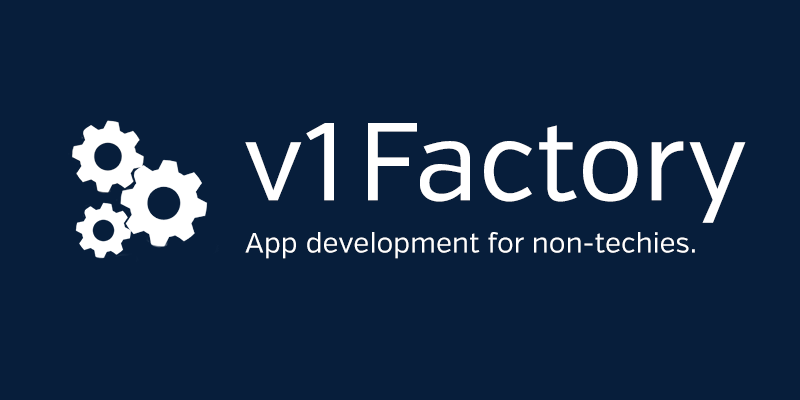
<style>
.page{position:relative;width:800px;height:400px;background:#071e3b}
.page>*{position:absolute;margin:0}
.t1{font:110px "VerbRegular";color:#ffffff}
.t2{font:28px "VerbRegular";color:#ffffff}
</style>
<div class="page">
<p class="t1" style="left:245px;top:123px;width:501px;height:100px">v1Factory</p>
<p class="t2" style="left:245px;top:232px;width:450px;height:27px">App development for non-techies.</p>
</div>
